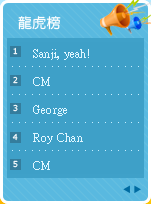
<style>
.page{position:relative;width:151px;height:204px;background:#3ea0c8}
.page>*{position:absolute;margin:0}
.t1{font:14px "DFYuan-Md-HK-BF";letter-spacing:0.02em;color:#ffffff}
.t2{font:8px "Verdana";letter-spacing:0.02em;color:#ffffff}
.t3{font:12px/28px "PMingLiU";letter-spacing:0.02em;color:#e0f6ff}
.t4{font:12px "PMingLiU";letter-spacing:0.02em;color:#c4eeff}
</style>
<div class="page">
<p class="t1" style="left:18px;top:16px;width:43px;height:14px">龍虎榜</p>
<p class="t2" style="left:13px;top:47px;width:5px;height:8px">1</p>
<p class="t3" style="left:33px;top:49px;width:56px;height:121px;text-align:justify">Sanji, yeah!<br>CM<br>George<br>Roy Chan<br>CM</p>
<p class="t4" style="left:12px;top:66px;width:127px;height:1px">. . . . . . . . . . . . . . . . . . . . . . . . . .</p>
<p class="t2" style="left:13px;top:76px;width:5px;height:8px">2</p>
<p class="t4" style="left:12px;top:94px;width:127px;height:1px">. . . . . . . . . . . . . . . . . . . . . . . . . .</p>
<p class="t2" style="left:13px;top:104px;width:5px;height:8px">3</p>
<p class="t4" style="left:12px;top:122px;width:127px;height:1px">. . . . . . . . . . . . . . . . . . . . . . . . . .</p>
<p class="t2" style="left:12px;top:133px;width:6px;height:8px">4</p>
<p class="t4" style="left:12px;top:150px;width:127px;height:1px">. . . . . . . . . . . . . . . . . . . . . . . . . .</p>
<p class="t2" style="left:13px;top:160px;width:5px;height:8px">5</p>
</div>
